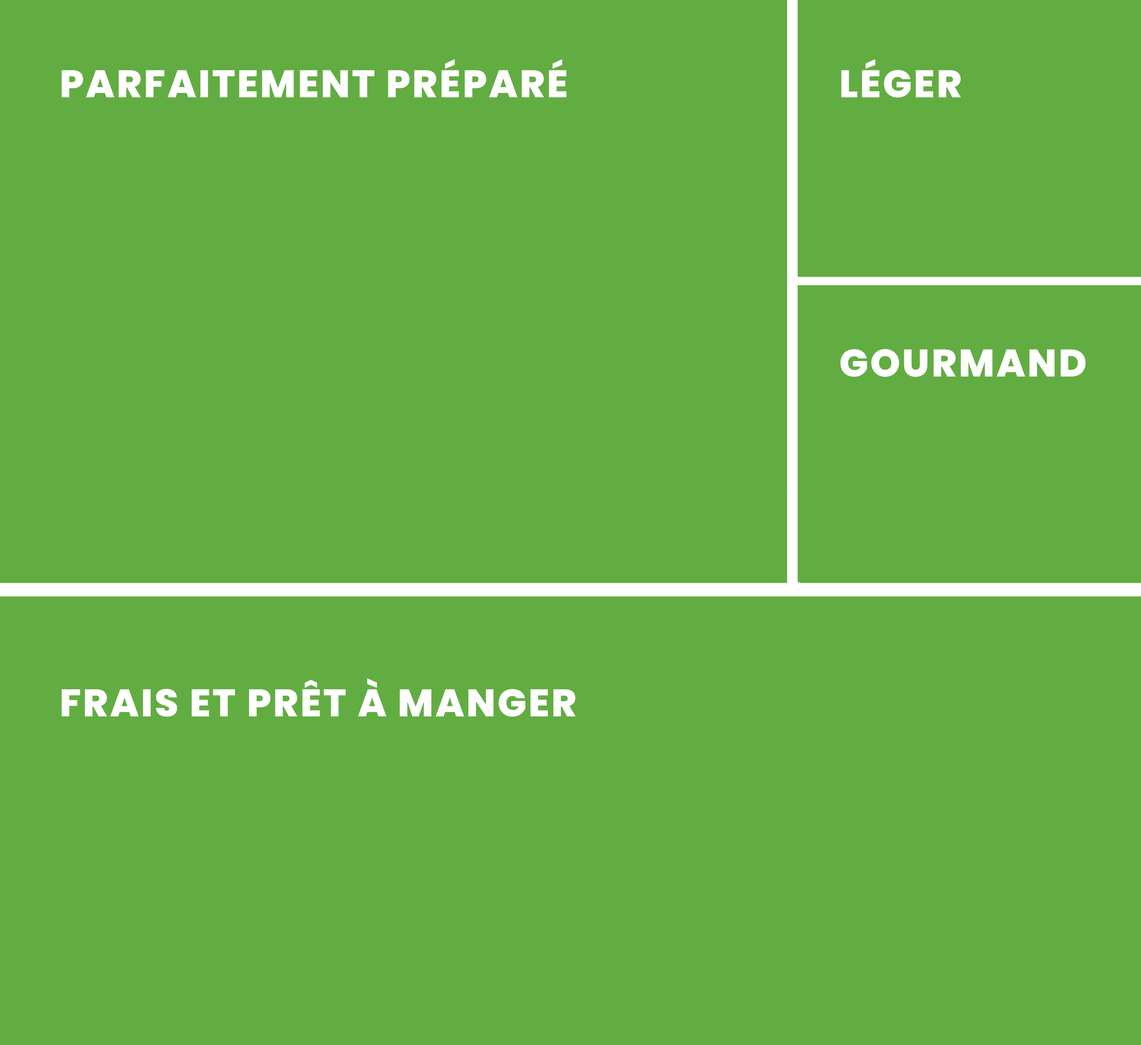
<style>
.page{position:relative;width:1141px;height:1045px;background:#62ad42}
.page>*{position:absolute;margin:0}
.t1{font:38.4px "Poppins-ExtraBold";letter-spacing:0.05em;color:#ffffff;text-transform:uppercase}
</style>
<div class="page">
<p class="t1" style="left:61px;top:59px;width:505px;height:38px">Parfaitement préparé</p>
<p class="t1" style="left:841px;top:59px;width:120px;height:39px">léger</p>
<p class="t1" style="left:840px;top:349px;width:246px;height:28px">gouRmand</p>
<p class="t1" style="left:61px;top:678px;width:515px;height:39px">frais et prêt à manger</p>
</div>
